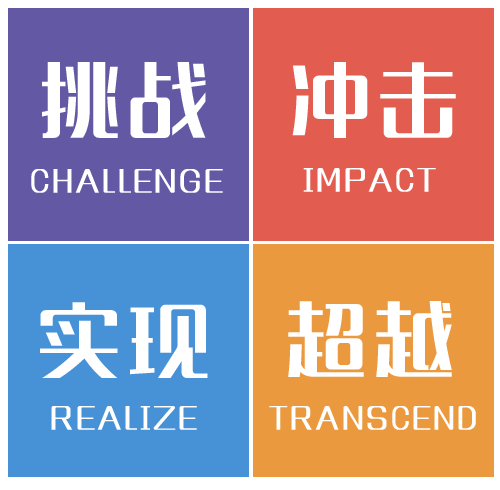
<style>
.page{position:relative;width:500px;height:490px}
.page>*{position:absolute;margin:0}
.t1{font:80px "MFLangQian_Noncommercial-Regular";letter-spacing:0.1em;color:#ffffff;font-variant:small-caps}
.t2{font:36px "MFLangQian_Noncommercial-Regular";letter-spacing:0.1em;color:#ffffff;font-variant:small-caps}
</style>
<div class="page">
<p class="t1" style="left:42px;top:62px;width:164px;height:76px">挑战</p>
<p class="t1" style="left:292px;top:62px;width:164px;height:76px">冲击</p>
<p class="t2" style="left:31px;top:169px;width:192px;height:24px">challenge</p>
<p class="t2" style="left:303px;top:168px;width:133px;height:24px">impact</p>
<p class="t1" style="left:40px;top:302px;width:168px;height:76px">实现</p>
<p class="t1" style="left:288px;top:301px;width:164px;height:76px">超越</p>
<p class="t2" style="left:51px;top:406px;width:146px;height:24px">realize</p>
<p class="t2" style="left:269px;top:406px;width:207px;height:24px">transcend</p>
</div>
